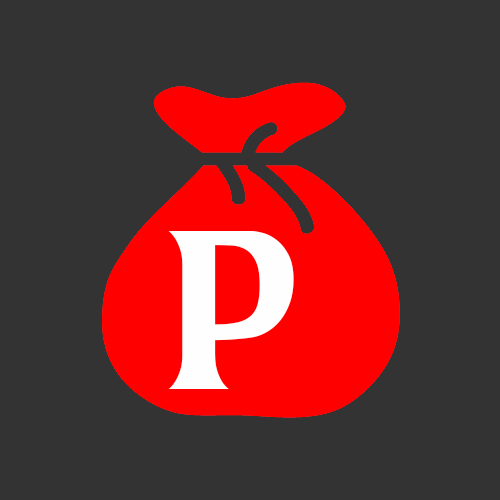
<style>
.page{position:relative;width:500px;height:500px;background:#333333}
.page>*{position:absolute;margin:0}
.t1{font:253.7px "Kertayasa";color:#fefefe;scale:1.04 1}
</style>
<div class="page">
<p class="t1" style="left:168px;top:231px;width:126px;height:158px">p</p>
</div>
